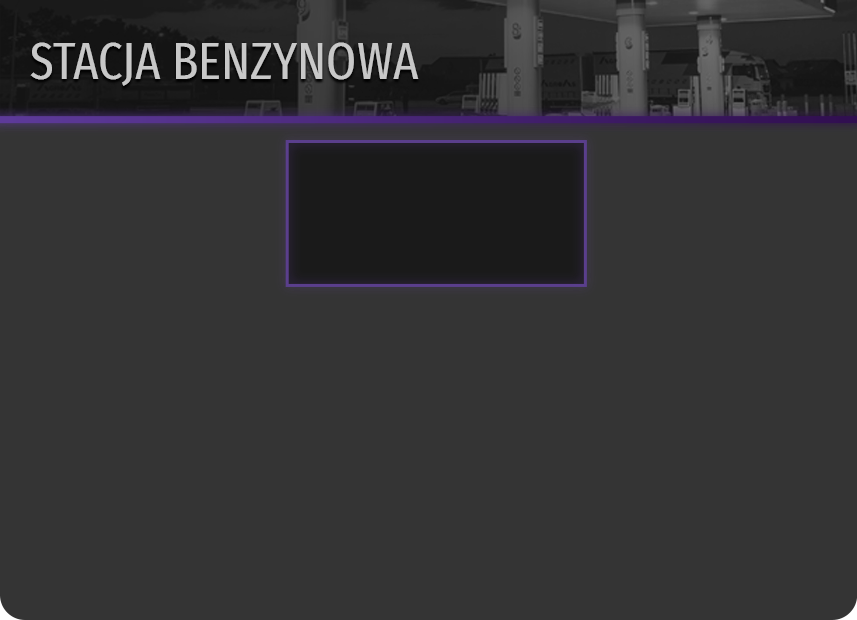
<style>
.page{position:relative;width:857px;height:620px;background:#343434}
.page>*{position:absolute;margin:0}
.t1{font:52.6px "FiraSansExtraCondensed-Regular";color:#c8c8c8}
</style>
<div class="page">
<p class="t1" style="left:30px;top:42px;width:389px;height:44px">STACJA BENZYNOWA</p>
</div>
